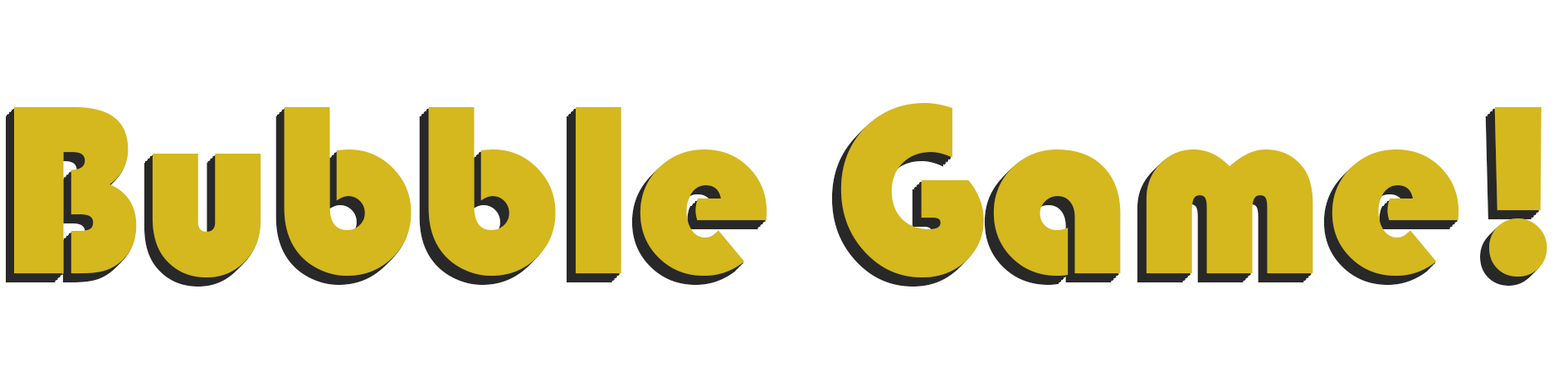
<style>
.page{position:relative;width:1568px;height:392px;background:#ffffff}
.page>*{position:absolute;margin:0}
.t1{font:248.9px "Bauhaus93";color:#d4b81d}
</style>
<div class="page">
<p class="t1" style="left:6px;top:112px;width:1532px;height:174px">Bubble Game!</p>
<p class="t1" style="left:7px;top:110px;width:1533px;height:175px">Bubble Game!</p>
<p class="t1" style="left:8px;top:110px;width:1533px;height:174px">Bubble Game!</p>
<p class="t1" style="left:9px;top:108px;width:1533px;height:174px">Bubble Game!</p>
<p class="t1" style="left:11px;top:107px;width:1532px;height:174px">Bubble Game!</p>
<p class="t1" style="left:12px;top:105px;width:1533px;height:175px">Bubble Game!</p>
<p class="t1" style="left:13px;top:105px;width:1533px;height:174px">Bubble Game!</p>
<p class="t1" style="left:14px;top:103px;width:1533px;height:174px">Bubble Game!</p>
</div>
